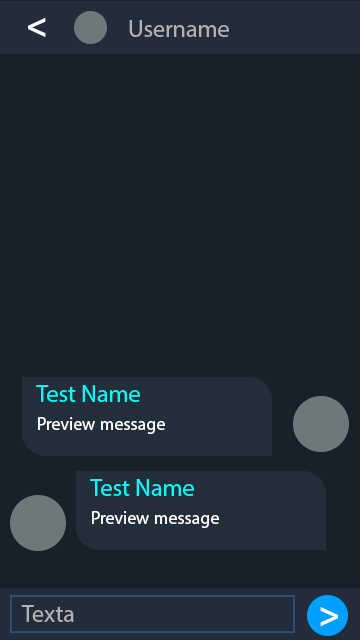
<style>
.page{position:relative;width:360px;height:640px;background:#17212b}
.page>*{position:absolute;margin:0}
.t1{font:36px "MyriadPro-Bold";color:#ffffff}
.t2{font:24px "MyriadPro-Regular";color:#b7b0b0}
.t3{font:24px "MyriadPro-Regular";color:#00ffff}
.t4{font:18px "MyriadPro-Regular";color:#ffffff}
</style>
<div class="page">
<p class="t1" style="left:28px;top:17px;width:18px;height:20px">&lt;</p>
<p class="t2" style="left:129px;top:20px;width:100px;height:17px">Username</p>
<p class="t3" style="left:36px;top:385px;width:104px;height:17px">Test Name</p>
<p class="t4" style="left:38px;top:417px;width:127px;height:17px">Preview message</p>
<p class="t3" style="left:90px;top:479px;width:104px;height:17px">Test Name</p>
<p class="t4" style="left:92px;top:511px;width:127px;height:17px">Preview message</p>
<p class="t2" style="left:21px;top:605px;width:53px;height:17px">Texta</p>
<p class="t1" style="left:320px;top:607px;width:18px;height:20px;rotate:180deg">&lt;</p>
</div>
